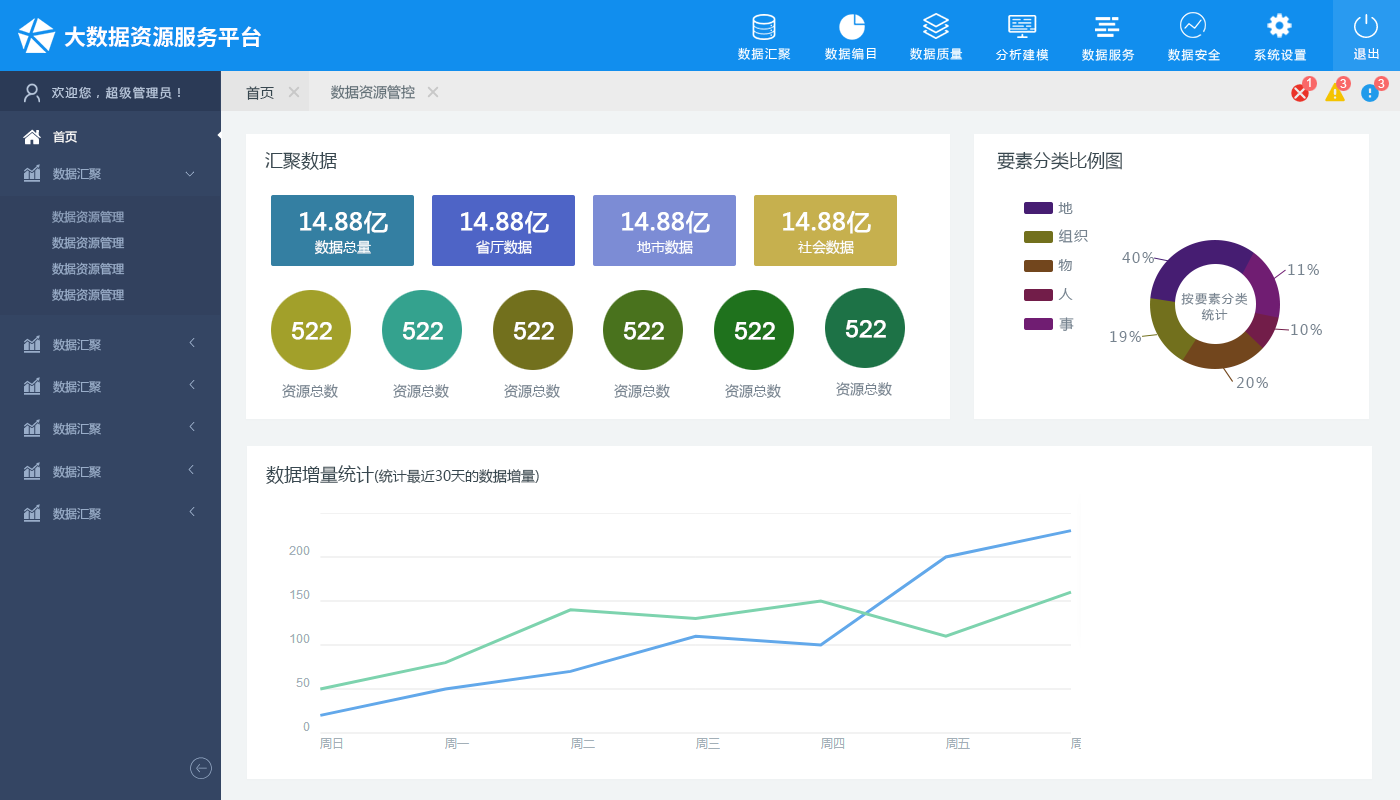
<style>
.page{position:relative;width:1400px;height:800px;background:#ffffff}
.page>*{position:absolute;margin:0}
.t1{font:22px "NotoSansCJKsc-Bold";color:#ffffff}
.t2{font:12px "MicrosoftYaHei";letter-spacing:0.12em;color:#ffffff}
.t3{font:12px "ArialMT";color:#ffffff}
.t4{font:12px "MicrosoftYaHei";letter-spacing:0.12em;color:#bac9de}
.t5{font:14px "MicrosoftYaHei";color:#37474f}
.t6{font:14px "MicrosoftYaHei";color:#627077}
.t7{font:12px "MicrosoftYaHei";color:#ffffff}
.t8{font:18px "MicrosoftYaHei";color:#37474f}
.t9{font:12px "MicrosoftYaHei";color:#99adc9}
.t10{font:12px "YouYuan"}
.t11{font:14px "MicrosoftYaHei";letter-spacing:0.12em;color:#76838f}
.t12{font:12px "MicrosoftYaHei";color:#8ea1bd}
.t13{font:24px "MicrosoftYaHei";color:#feffff;font-weight:bold}
.t14{font:14px "MicrosoftYaHei";color:#feffff}
.t15{font:12px/16px "MicrosoftYaHei";letter-spacing:0.12em;color:#76838f}
.t16{font:24px "ArialMT";color:#ffffff;font-weight:bold}
.t17{font:14px "MicrosoftYaHei";color:#76838f}
</style>
<div class="page">
<p class="t1" style="left:64px;top:26px;width:197px;height:22px">大数据资源服务平台</p>
<p class="t2" style="left:738px;top:47px;width:53px;height:13px">数据汇聚</p>
<p class="t2" style="left:825px;top:47px;width:51px;height:13px">数据编目</p>
<p class="t2" style="left:910px;top:47px;width:53px;height:13px">数据质量</p>
<p class="t2" style="left:996px;top:48px;width:53px;height:13px">分析建模</p>
<p class="t2" style="left:1082px;top:48px;width:53px;height:13px">数据服务</p>
<p class="t2" style="left:1168px;top:48px;width:52px;height:13px">数据安全</p>
<p class="t2" style="left:1254px;top:48px;width:53px;height:13px">系统设置</p>
<p class="t2" style="left:1354px;top:48px;width:25px;height:12px">退出</p>
<p class="t3" style="left:1307px;top:78px;width:4px;height:9px">1</p>
<p class="t4" style="left:52px;top:86px;width:128px;height:13px">欢迎您，超级管理员！</p>
<p class="t5" style="left:246px;top:86px;width:28px;height:14px">首页</p>
<p class="t6" style="left:331px;top:85px;width:84px;height:15px">数据资源管控</p>
<p class="t3" style="left:1340px;top:79px;width:7px;height:9px">3</p>
<p class="t3" style="left:1378px;top:79px;width:7px;height:9px">3</p>
<p class="t7" style="left:53px;top:131px;width:24px;height:12px">首页</p>
<p class="t8" style="left:265px;top:152px;width:72px;height:18px">汇聚数据</p>
<p class="t8" style="left:997px;top:151px;width:125px;height:19px">要素分类比例图</p>
<p class="t9" style="left:53px;top:167px;width:48px;height:13px">数据汇聚</p>
<p class="t10" style="left:185px;top:171px;width:9px;height:6px;rotate:-90deg">&lt;</p>
<p class="t11" style="left:1058px;top:202px;width:15px;height:12px">地</p>
<p class="t12" style="left:52px;top:210px;width:73px;height:13px">数据资源管理</p>
<p class="t13" style="left:300px;top:211px;width:88px;height:23px">14.88亿</p>
<p class="t13" style="left:461px;top:211px;width:88px;height:23px">14.88亿</p>
<p class="t13" style="left:622px;top:211px;width:88px;height:23px">14.88亿</p>
<p class="t13" style="left:783px;top:211px;width:88px;height:23px">14.88亿</p>
<p class="t11" style="left:1058px;top:229px;width:30px;height:14px">组织</p>
<p class="t9" style="left:52px;top:236px;width:73px;height:13px">数据资源管理</p>
<p class="t14" style="left:315px;top:240px;width:56px;height:15px">数据总量</p>
<p class="t14" style="left:476px;top:240px;width:56px;height:15px">省厅数据</p>
<p class="t14" style="left:637px;top:240px;width:56px;height:15px">地市数据</p>
<p class="t14" style="left:798px;top:240px;width:56px;height:15px">社会数据</p>
<p class="t11" style="left:1122px;top:252px;width:32px;height:11px">40%</p>
<p class="t9" style="left:52px;top:262px;width:73px;height:13px">数据资源管理</p>
<p class="t11" style="left:1058px;top:259px;width:14px;height:12px">物</p>
<p class="t11" style="left:1288px;top:264px;width:31px;height:11px">11%</p>
<p class="t9" style="left:52px;top:288px;width:73px;height:13px">数据资源管理</p>
<p class="t11" style="left:1058px;top:288px;width:15px;height:12px">人</p>
<p class="t15" style="left:1181px;top:292px;width:67px;height:29px;text-align:center">按要素分类<br>统计</p>
<p class="t11" style="left:1059px;top:317px;width:15px;height:14px">事</p>
<p class="t16" style="left:291px;top:322px;width:41px;height:18px">522</p>
<p class="t16" style="left:402px;top:322px;width:41px;height:18px">522</p>
<p class="t16" style="left:513px;top:322px;width:41px;height:18px">522</p>
<p class="t16" style="left:623px;top:322px;width:41px;height:18px">522</p>
<p class="t16" style="left:734px;top:322px;width:41px;height:18px">522</p>
<p class="t16" style="left:845px;top:320px;width:41px;height:18px">522</p>
<p class="t11" style="left:1291px;top:324px;width:31px;height:11px">10%</p>
<p class="t9" style="left:53px;top:338px;width:48px;height:13px">数据汇聚</p>
<p class="t10" style="left:189px;top:338px;width:6px;height:9px">&lt;</p>
<p class="t11" style="left:1110px;top:331px;width:31px;height:11px">19%</p>
<p class="t11" style="left:1236px;top:377px;width:32px;height:11px">20%</p>
<p class="t9" style="left:53px;top:380px;width:48px;height:13px">数据汇聚</p>
<p class="t10" style="left:189px;top:380px;width:6px;height:9px">&lt;</p>
<p class="t17" style="left:282px;top:384px;width:56px;height:15px">资源总数</p>
<p class="t17" style="left:393px;top:384px;width:56px;height:15px">资源总数</p>
<p class="t17" style="left:504px;top:384px;width:56px;height:15px">资源总数</p>
<p class="t17" style="left:614px;top:384px;width:56px;height:15px">资源总数</p>
<p class="t17" style="left:725px;top:384px;width:56px;height:15px">资源总数</p>
<p class="t17" style="left:836px;top:382px;width:56px;height:15px">资源总数</p>
<p class="t9" style="left:53px;top:422px;width:48px;height:13px">数据汇聚</p>
<p class="t10" style="left:189px;top:422px;width:6px;height:9px">&lt;</p>
<p class="t9" style="left:53px;top:465px;width:48px;height:13px">数据汇聚</p>
<p class="t10" style="left:188px;top:465px;width:6px;height:9px">&lt;</p>
<p class="t5" style="left:266px;top:465px;width:273px;height:19px"><span class="t8">数据增量统计</span>(统计最近30天的数据增量)</p>
<p class="t9" style="left:53px;top:507px;width:48px;height:13px">数据汇聚</p>
<p class="t10" style="left:189px;top:507px;width:6px;height:9px">&lt;</p>
</div>
